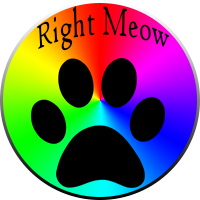
<style>
.page{position:relative;width:200px;height:200px;background:#000000}
.page>*{position:absolute;margin:0}
.t1{font:24px "HighTowerText-Reg";color:#000000}
</style>
<div class="page">
<p class="t1" style="left:37px;top:6px;width:133px;height:45px;text-align:center">Right Meow</p>
</div>
